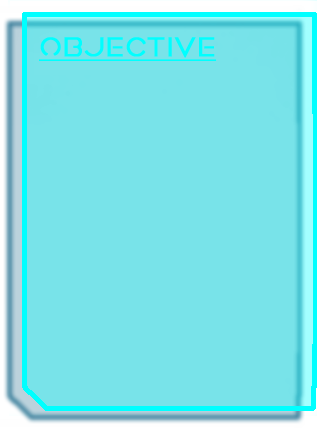
<style>
.page{position:relative;width:328px;height:428px;background:#78e3e9}
.page>*{position:absolute;margin:0}
.t1{font:30px "EarthOrbiter";color:#00ffff;font-weight:bold;text-decoration:underline}
</style>
<div class="page">
<p class="t1" style="left:39px;top:37px;width:178px;height:24px">objective</p>
</div>
